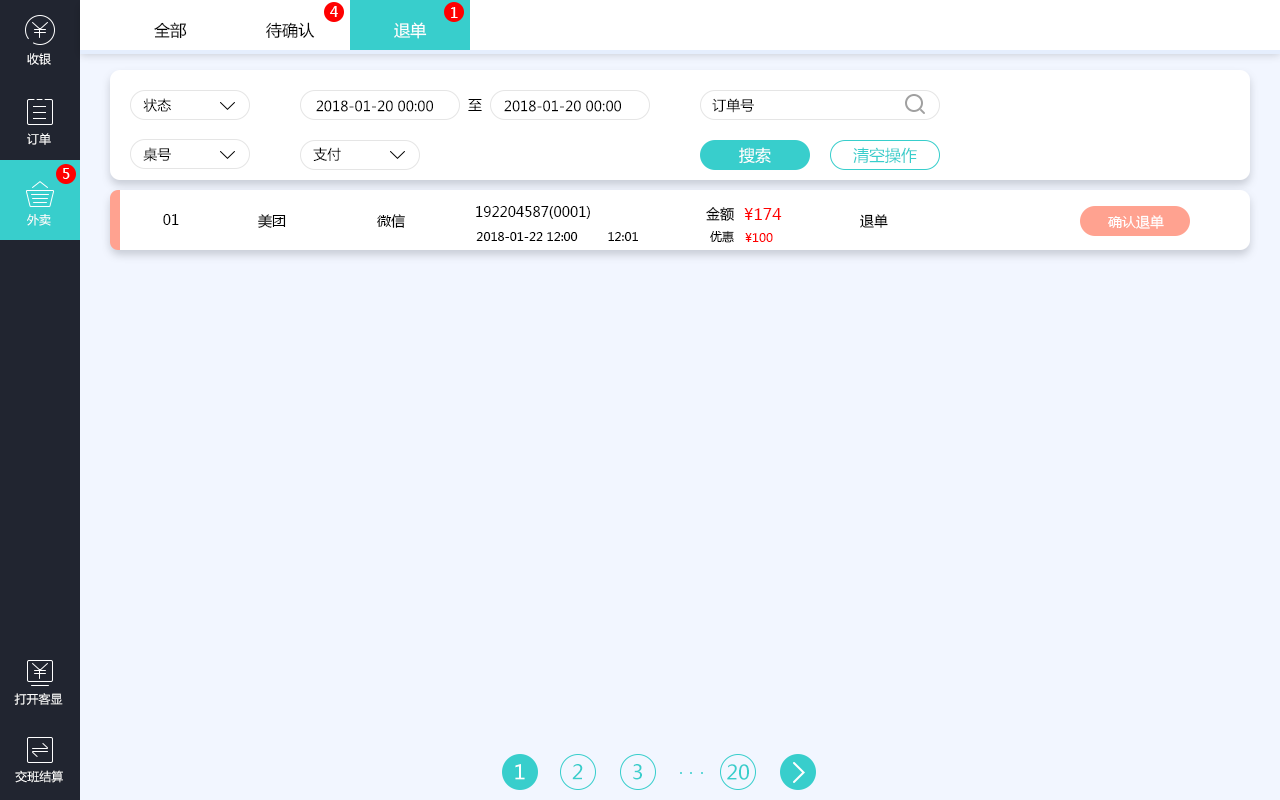
<style>
.page{position:relative;width:1280px;height:800px;background:#f2f6ff}
.page>*{position:absolute;margin:0}
.t1{font:14px "MicrosoftYaHei";color:#ffffff}
.t2{font:16px "MicrosoftYaHei";color:#000000}
.t3{font:16px "MicrosoftYaHei";color:#ffffff}
.t4{font:12px "MicrosoftYaHei";color:#ffffff}
.t5{font:14px "MicrosoftYaHei";color:#000000}
.t6{font:16px "MicrosoftYaHei";color:#38cecc}
.t7{font:16px "MicrosoftYaHei";color:#ff0000}
.t8{font:12px "MicrosoftYaHei";color:#000000}
.t9{font:12px "MicrosoftYaHei";color:#ff0000}
.t10{font:20px "MicrosoftYaHei";color:#ffffff}
.t11{font:20px "MicrosoftYaHei";color:#38cecc}
</style>
<div class="page">
<p class="t1" style="left:330px;top:6px;width:8px;height:11px">4</p>
<p class="t1" style="left:451px;top:7px;width:7px;height:11px">1</p>
<p class="t2" style="left:154px;top:22px;width:33px;height:17px">全部</p>
<p class="t2" style="left:266px;top:22px;width:49px;height:17px">待确认</p>
<p class="t3" style="left:394px;top:22px;width:33px;height:17px">退单</p>
<p class="t4" style="left:27px;top:53px;width:24px;height:12px">收银</p>
<p class="t5" style="left:143px;top:98px;width:28px;height:14px">状态</p>
<p class="t5" style="left:316px;top:100px;width:117px;height:12px">2018-01-20 00:00</p>
<p class="t5" style="left:468px;top:99px;width:14px;height:12px">至</p>
<p class="t5" style="left:504px;top:100px;width:117px;height:12px">2018-01-20 00:00</p>
<p class="t5" style="left:712px;top:98px;width:42px;height:15px">订单号</p>
<p class="t4" style="left:27px;top:133px;width:24px;height:12px">订单</p>
<p class="t5" style="left:143px;top:147px;width:28px;height:15px">桌号</p>
<p class="t5" style="left:313px;top:147px;width:28px;height:14px">支付</p>
<p class="t3" style="left:739px;top:147px;width:32px;height:17px">搜索</p>
<p class="t6" style="left:853px;top:147px;width:64px;height:16px">清空操作</p>
<p class="t1" style="left:63px;top:168px;width:7px;height:11px">5</p>
<p class="t5" style="left:476px;top:206px;width:114px;height:13px">192204587(0001)</p>
<p class="t5" style="left:706px;top:207px;width:28px;height:14px">金额</p>
<p class="t7" style="left:744px;top:208px;width:38px;height:12px">¥174</p>
<p class="t4" style="left:27px;top:214px;width:24px;height:12px">外卖</p>
<p class="t5" style="left:163px;top:214px;width:16px;height:11px">01</p>
<p class="t5" style="left:258px;top:214px;width:28px;height:14px">美团</p>
<p class="t5" style="left:377px;top:214px;width:28px;height:14px">微信</p>
<p class="t5" style="left:860px;top:214px;width:28px;height:14px">退单</p>
<p class="t1" style="left:1108px;top:215px;width:56px;height:14px">确认退单</p>
<p class="t8" style="left:476px;top:232px;width:102px;height:9px">2018-01-22 12:00</p>
<p class="t8" style="left:608px;top:232px;width:30px;height:9px">12:01</p>
<p class="t8" style="left:710px;top:230px;width:24px;height:13px">优惠</p>
<p class="t9" style="left:745px;top:233px;width:28px;height:9px">¥100</p>
<p class="t4" style="left:14px;top:693px;width:49px;height:12px">打开客显</p>
<p class="t4" style="left:15px;top:770px;width:48px;height:13px">交班结算</p>
<p class="t10" style="left:515px;top:764px;width:10px;height:16px">1</p>
<p class="t11" style="left:572px;top:764px;width:11px;height:16px">2</p>
<p class="t11" style="left:633px;top:764px;width:9px;height:16px">3</p>
<p class="t11" style="left:727px;top:764px;width:22px;height:16px">20</p>
</div>
